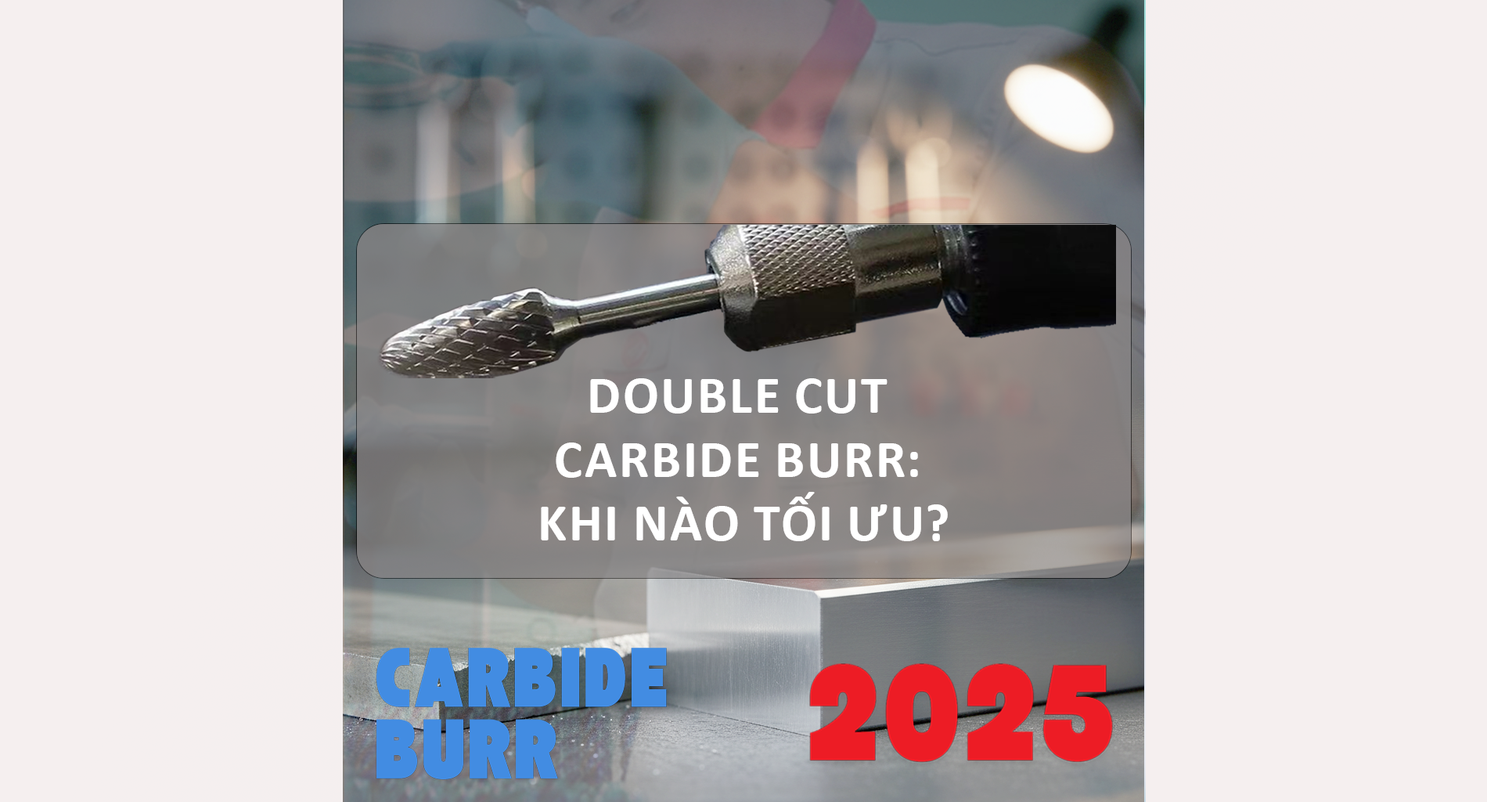
<style>
.page{position:relative;width:1487px;height:802px;background:#f5efef}
.page>*{position:absolute;margin:0}
.t1{font:53.2px "Calibri-Bold";color:#ffffff;text-transform:uppercase}
</style>
<div class="page">
<p class="t1" style="left:541px;top:378px;width:407px;height:163px;text-align:center">Double Cut <br>Carbide Burr: <br>Khi nào tối ưu?</p>
</div>
